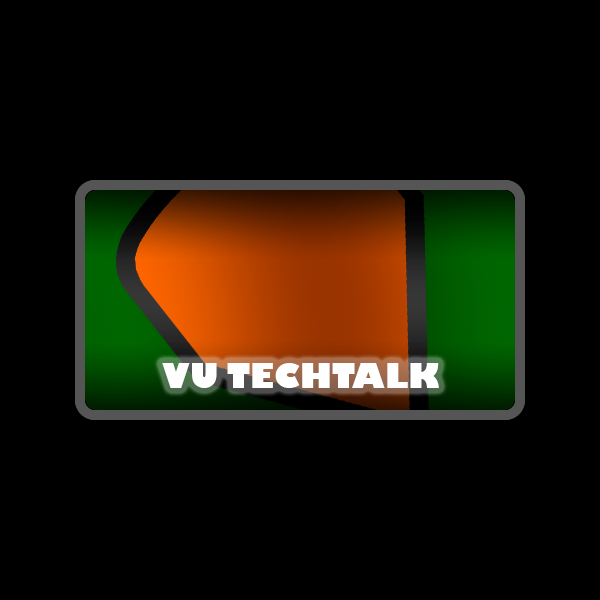
<style>
.page{position:relative;width:600px;height:600px;background:#000000}
.page>*{position:absolute;margin:0}
.t1{font:33px "GillSans-UltraBold";color:#ffffff}
</style>
<div class="page">
<p class="t1" style="left:162px;top:363px;width:277px;height:25px">VU TECHTALK</p>
</div>
